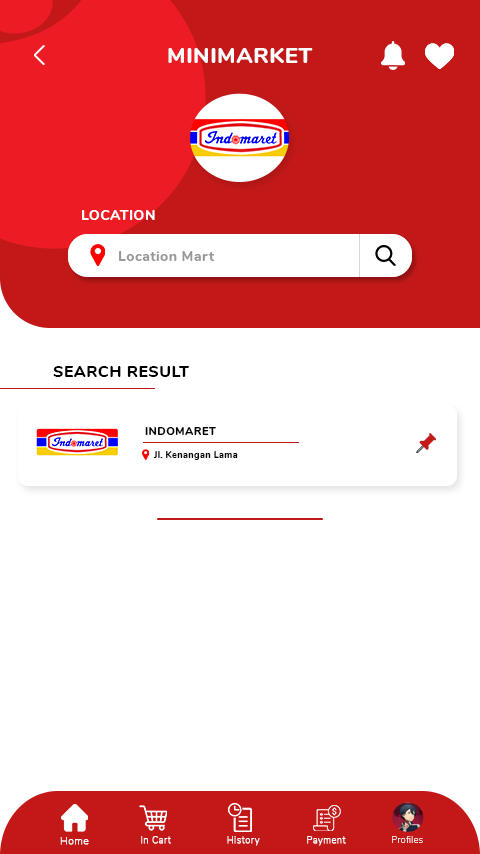
<style>
.page{position:relative;width:480px;height:854px;background:#ffffff}
.page>*{position:absolute;margin:0}
.t1{font:22.5px "Nunito-ExtraBold";letter-spacing:0.01em;color:#ffffff}
.t2{font:14.5px "Nunito-ExtraBold";letter-spacing:0.01em;color:#ffffff}
.t3{font:14.5px "Nunito-ExtraBold";letter-spacing:0.01em;color:#989898}
.t4{font:16.5px "Nunito-ExtraBold";letter-spacing:0.01em;color:#000000}
.t5{font:11.5px "Nunito-ExtraBold";letter-spacing:0.01em;color:#000000}
.t6{font:9.5px "Nunito-ExtraBold";letter-spacing:0.01em;color:#000000}
.t7{font:9.9px "Nunito-ExtraLight";letter-spacing:0.05em;color:#ffffff;font-weight:bold}
.t8{font:8.7px "Nunito-ExtraLight";letter-spacing:0.07em;color:#ffffff;font-weight:bold}
.t9{font:8.7px "Nunito-ExtraLight";letter-spacing:0.07em;color:#ffffff}
</style>
<div class="page">
<p class="t1" style="left:168px;top:48px;width:145px;height:15px">MINIMARKET</p>
<p class="t2" style="left:82px;top:210px;width:73px;height:10px">LOCATION</p>
<p class="t3" style="left:119px;top:251px;width:96px;height:10px">Location Mart</p>
<p class="t4" style="left:53px;top:366px;width:136px;height:11px">SEARCH RESULT</p>
<p class="t5" style="left:145px;top:427px;width:71px;height:8px">INDOMARET</p>
<p class="t6" style="left:153px;top:451px;width:85px;height:9px">Jl. Kenangan Lama</p>
<p class="t7" style="left:60px;top:837px;width:29px;height:8px">Home</p>
<p class="t8" style="left:141px;top:836px;width:30px;height:8px">In Cart</p>
<p class="t8" style="left:227px;top:836px;width:33px;height:10px">History</p>
<p class="t8" style="left:307px;top:836px;width:39px;height:10px">Payment</p>
<p class="t9" style="left:392px;top:836px;width:31px;height:7px">Profiles</p>
</div>
